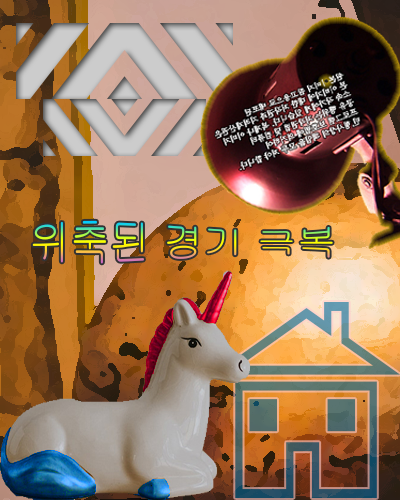
<style>
.page{position:relative;width:400px;height:500px}
.page>*{position:absolute;margin:0}
.t1{font:40px "Gulim"}
</style>
<div class="page">
<p class="t1" style="left:32px;top:220px;width:301px;height:44px">위축된 경기 극복</p>
</div>
